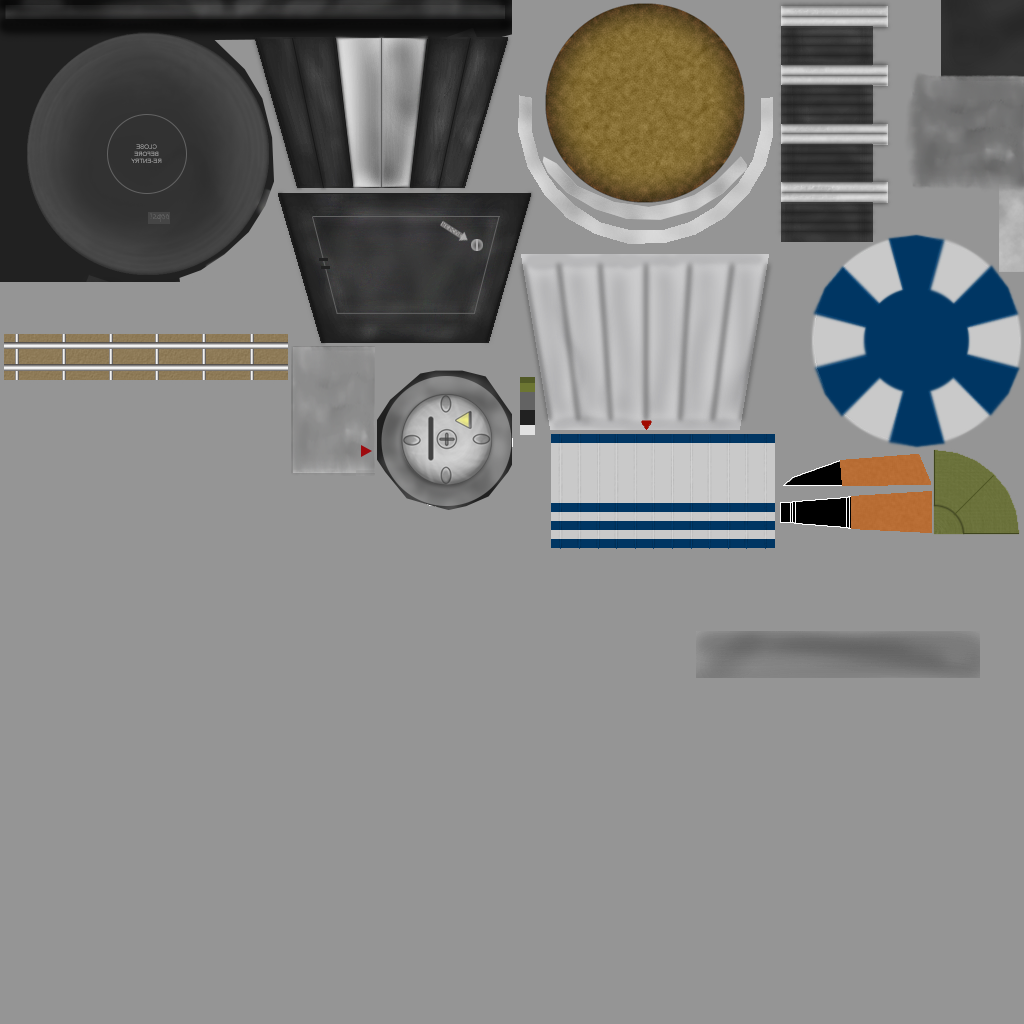
<style>
.page{position:relative;width:1024px;height:1024px;background:#959595}
.page>*{position:absolute;margin:0}
.t1{font:6px "ArialMT"}
.t2{font:10px "BradleyHandITC";color:#777777}
</style>
<div class="page">
<p class="t1" style="left:131px;top:144px;width:31px;height:19px;text-align:center;rotate:180deg">CLOSE<br>BEFORE<br>RE-ENTRY</p>
<p class="t2" style="left:150px;top:213px;width:19px;height:9px;rotate:180deg">oops!</p>
</div>
